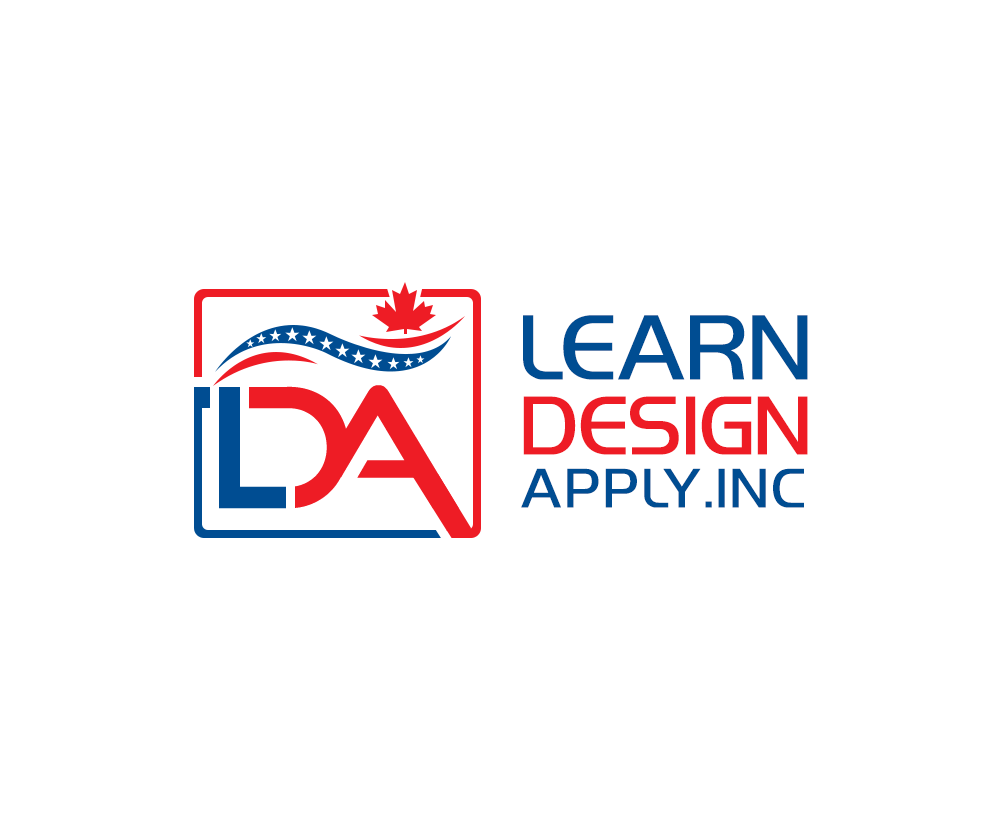
<style>
.page{position:relative;width:1000px;height:818px;background:#ffffff}
.page>*{position:absolute;margin:0}
.t1{font:83.3px "HighlandGothicLightFLF";letter-spacing:0.02em;color:#004d92;text-transform:uppercase}
.t2{font:75px "HighlandGothicLightFLF";letter-spacing:0.02em;color:#ee1c25;text-transform:uppercase}
.t3{font:50px "HighlandGothicLightFLF";letter-spacing:0.08em;color:#004d92;text-transform:uppercase}
</style>
<div class="page">
<p class="t1" style="left:523px;top:315px;width:285px;height:65px">Learn</p>
<p class="t2" style="left:523px;top:396px;width:285px;height:59px">Design</p>
<p class="t3" style="left:521px;top:468px;width:283px;height:40px">apply.inc</p>
</div>
